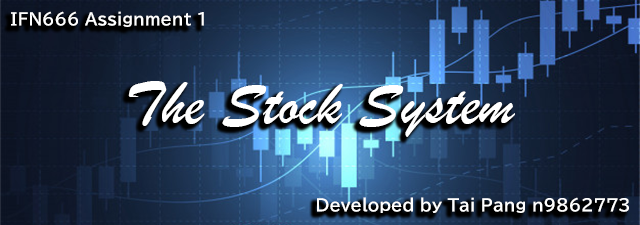
<style>
.page{position:relative;width:640px;height:225px}
.page>*{position:absolute;margin:0}
.t1{font:16.4px "BIZ-UDPGothic-Bold";color:#ffffff}
.t2{font:64px "BrushScriptMT";color:#ffffff}
</style>
<div class="page">
<p class="t1" style="left:11px;top:11px;width:193px;height:16px">IFN666 Assignment 1</p>
<p class="t2" style="left:128px;top:81px;width:387px;height:56px">The Stock System</p>
<p class="t1" style="left:317px;top:197px;width:312px;height:16px">Developed by Tai Pang n9862773</p>
</div>
